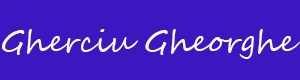
<style>
.page{position:relative;width:300px;height:80px;background:#3c16be}
.page>*{position:absolute;margin:0}
.t1{font:30px "SegoeScript";color:#fdfdfe}
</style>
<div class="page">
<p class="t1" style="left:2px;top:29px;width:298px;height:30px">Gherciu Gheorghe</p>
</div>
